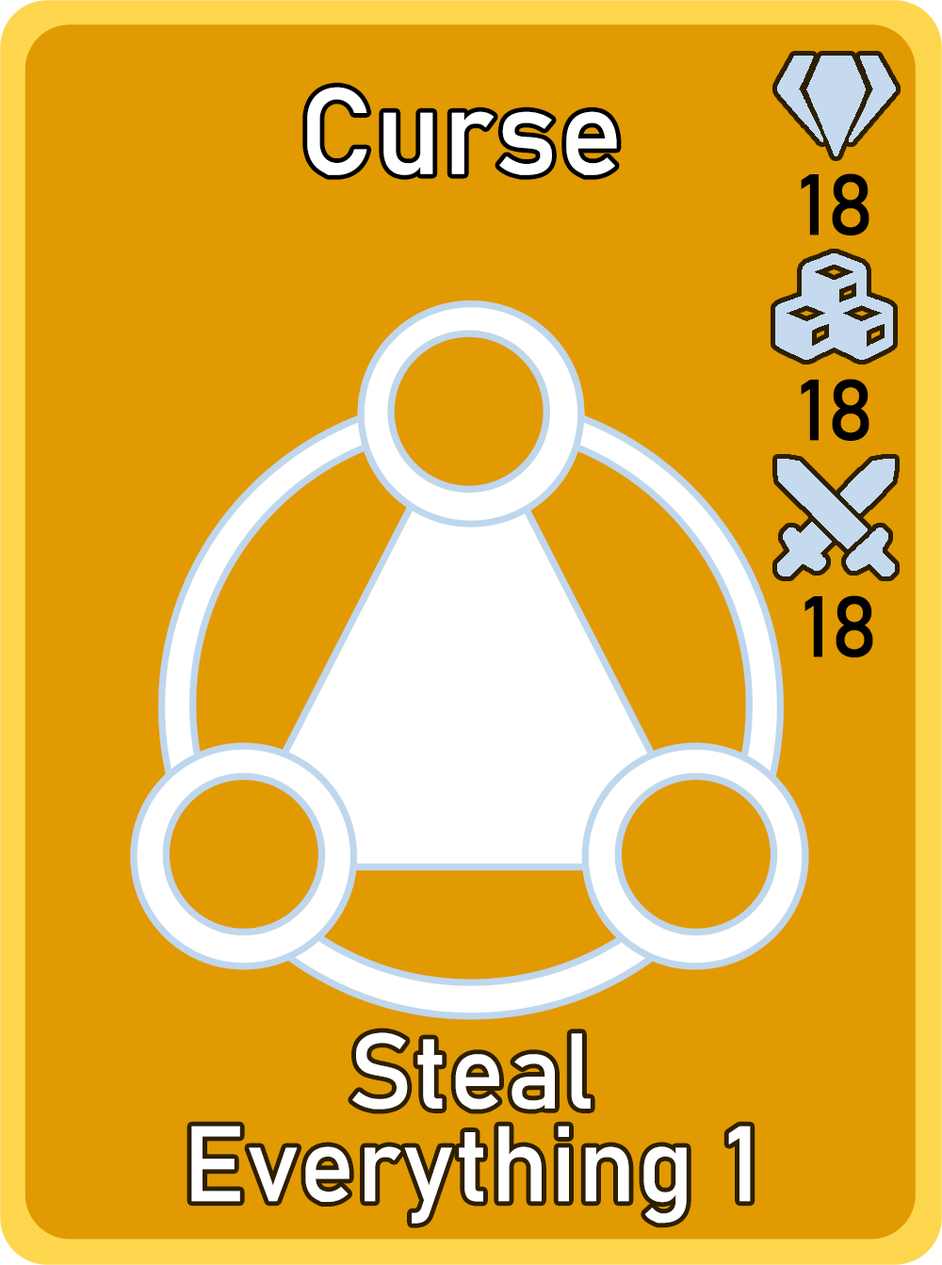
<style>
.page{position:relative;width:942px;height:1265px;background:#e19a02}
.page>*{position:absolute;margin:0}
.t1{font:120.6px "Bahnschrift";letter-spacing:0.01em;color:#ffffff}
.t2{font:85px "Bahnschrift";letter-spacing:0.01em;color:#000000}
.t3{font:105.1px/92.7px "Bahnschrift";letter-spacing:0.01em;color:#ffffff}
</style>
<div class="page">
<p class="t1" style="left:307px;top:87px;width:310px;height:88px">Curse</p>
<p class="t2" style="left:801px;top:173px;width:69px;height:63px">18</p>
<p class="t2" style="left:801px;top:379px;width:69px;height:62px">18</p>
<p class="t2" style="left:805px;top:596px;width:68px;height:62px">18</p>
<p class="t3" style="left:191px;top:1033px;width:560px;height:191px;text-align:center">Steal<br>Everything 1</p>
</div>
